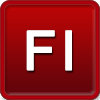
<style>
.page{position:relative;width:100px;height:100px}
.page>*{position:absolute;margin:0}
.t1{font:60px "Vrinda";letter-spacing:0.075em;color:#ffffff;font-weight:bold}
</style>
<div class="page">
<p class="t1" style="left:26px;top:30px;width:46px;height:41px">Fl</p>
</div>
